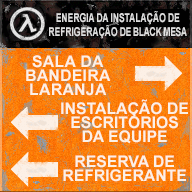
<style>
.page{position:relative;width:192px;height:192px}
.page>*{position:absolute;margin:0}
.t1{font:12px "Arial-BoldMT";letter-spacing:-0.05em;color:#dddddd;text-transform:uppercase;scale:0.73 1}
.t2{font:12px "Arial-BoldMT";letter-spacing:-0.05em;color:#dddddd;scale:0.73 1}
.t3{font:16px/14px "Arial-BoldMT";letter-spacing:0.02em;color:#fcf0e6}
.t4{font:16px/14px "Arial-BoldMT";color:#fcf0e6}
</style>
<div class="page">
<p class="t1" style="left:49px;top:11px;width:138px;height:28px;text-align:center">ENERGIA DA Instalação DE<br>REFRIGERAÇÃO <span class="t2">DE BLACK MESA</span></p>
<p class="t3" style="left:26px;top:55px;width:85px;height:41px;text-align:center">SALA DA<br>BANDEIRA<br>LARANJA</p>
<p class="t4" style="left:61px;top:99px;width:127px;height:45px;text-align:center">INSTALAÇÃO DE<br>ESCRITÓRIOS<br>DA EQUIPE</p>
<p class="t4" style="left:63px;top:155px;width:123px;height:27px;text-align:center">RESERVA DE<br>REFRIGERANTE</p>
</div>
